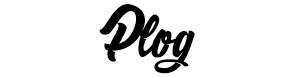
<style>
.page{position:relative;width:300px;height:77px;background:#ffffff}
.page>*{position:absolute;margin:0}
.t1{font:48px "MasterofComicsPersonalUse";color:#000000;scale:0.96 1}
</style>
<div class="page">
<p class="t1" style="left:99px;top:4px;width:96px;height:70px">Plog</p>
</div>
